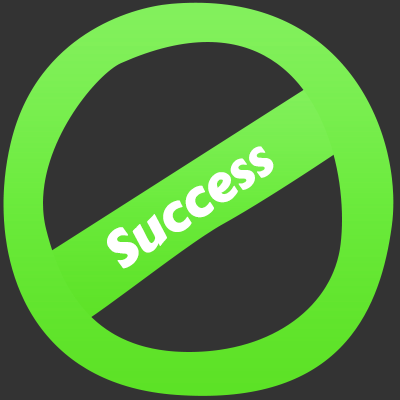
<style>
.page{position:relative;width:400px;height:400px;background:#333333}
.page>*{position:absolute;margin:0}
.t1{font:52px "CarterOne";color:#ffffff}
</style>
<div class="page">
<p class="t1" style="left:107px;top:146px;width:167px;height:123px;rotate:-33deg">Success</p>
</div>
